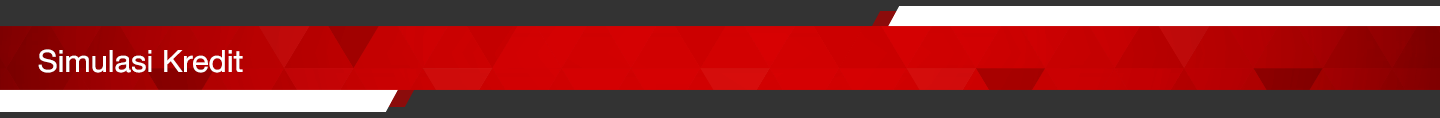
<style>
.page{position:relative;width:1440px;height:118px;background:#333333}
.page>*{position:absolute;margin:0}
.t1{font:30.6px "HelveticaNeueLTStd-Roman";color:#ffffff}
</style>
<div class="page">
<p class="t1" style="left:38px;top:49px;width:205px;height:24px">Simulasi Kredit</p>
</div>
